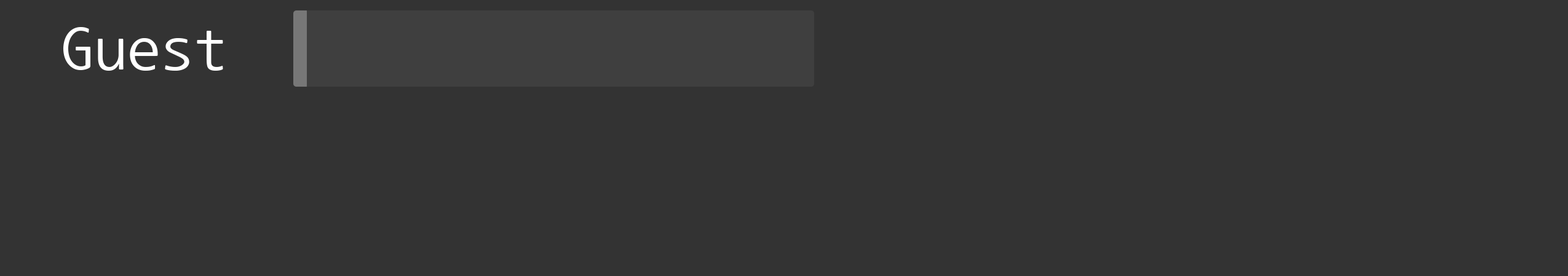
<style>
.page{position:relative;width:1568px;height:276px;background:#333333}
.page>*{position:absolute;margin:0}
.t1{font:61.5px "NanumGothicCoding";color:#ffffff;scale:1.08 1}
</style>
<div class="page">
<p class="t1" style="left:63px;top:27px;width:160px;height:44px">Guest</p>
</div>
